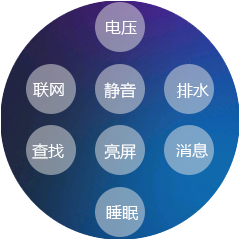
<style>
.page{position:relative;width:240px;height:240px;background:#ffffff}
.page>*{position:absolute;margin:0}
.t1{font:16px "MicrosoftYaHei";color:#ffffff;font-variant:small-caps}
</style>
<div class="page">
<p class="t1" style="left:106px;top:20px;width:31px;height:15px">电压</p>
<p class="t1" style="left:33px;top:82px;width:31px;height:15px">联网</p>
<p class="t1" style="left:104px;top:82px;width:32px;height:17px">静音</p>
<p class="t1" style="left:177px;top:83px;width:32px;height:15px">排水</p>
<p class="t1" style="left:32px;top:143px;width:32px;height:16px">查找</p>
<p class="t1" style="left:104px;top:143px;width:32px;height:17px">亮屏</p>
<p class="t1" style="left:176px;top:142px;width:32px;height:16px">消息</p>
<p class="t1" style="left:106px;top:205px;width:32px;height:15px">睡眠</p>
</div>
